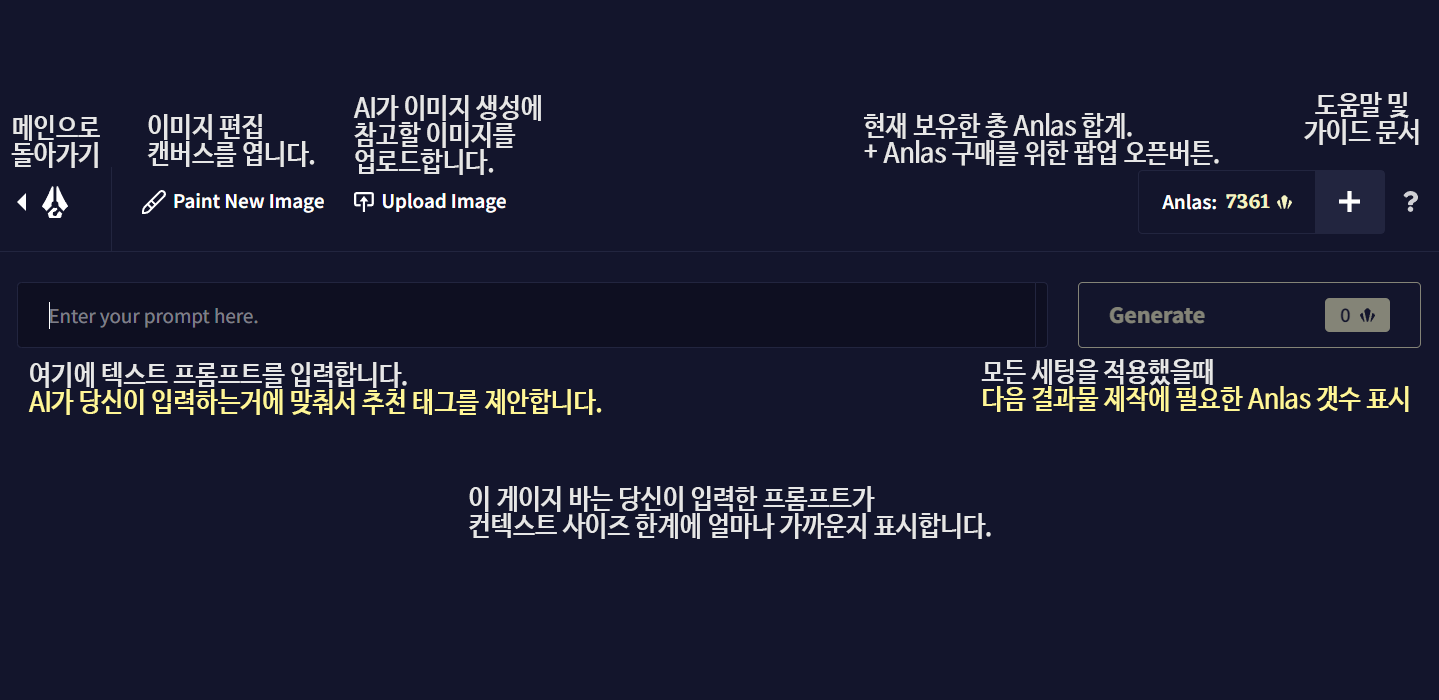
<style>
.page{position:relative;width:1439px;height:700px;background:#13152c}
.page>*{position:absolute;margin:0}
.t1{font:27.7px/26.8px "NanumBarunGothicBold";color:#e6e6e6;scale:0.9 1}
.t2{font:27.7px/26.8px "NanumBarunGothicBold";color:#fff696;scale:0.9 1}
</style>
<div class="page">
<p class="t1" style="left:353px;top:95px;width:188px;height:80px">AI가 이미지 생성에<br>참고할 이미지를<br>업로드합니다.</p>
<p class="t1" style="left:1304px;top:92px;width:115px;height:53px;text-align:center">도움말 및<br>가이드 문서</p>
<p class="t1" style="left:864px;top:113px;width:355px;height:53px">현재 보유한 총 Anlas 합계.<br>+ Anlas 구매를 위한 팝업 오픈버튼.</p>
<p class="t1" style="left:11px;top:115px;width:89px;height:53px">메인으로 <br>돌아가기</p>
<p class="t1" style="left:147px;top:114px;width:168px;height:53px">이미지 편집<br>캔버스를 엽니다.</p>
<p class="t2" style="left:28px;top:362px;width:574px;height:53px"><span class="t1">여기에 텍스트 프롬프트를 입력합니다.<br></span>AI가 당신이 입력하는거에 맞춰서 추천 태그를 제안합니다.</p>
<p class="t2" style="left:981px;top:359px;width:428px;height:53px"><span class="t1">모든 세팅을 적용했을때 <br></span>다음 결과물 제작에 필요한 Anlas 갯수 표시</p>
<p class="t1" style="left:469px;top:486px;width:522px;height:53px">이 게이지 바는 당신이 입력한 프롬프트가<br>컨텍스트 사이즈 한계에 얼마나 가까운지 표시합니다.</p>
</div>
